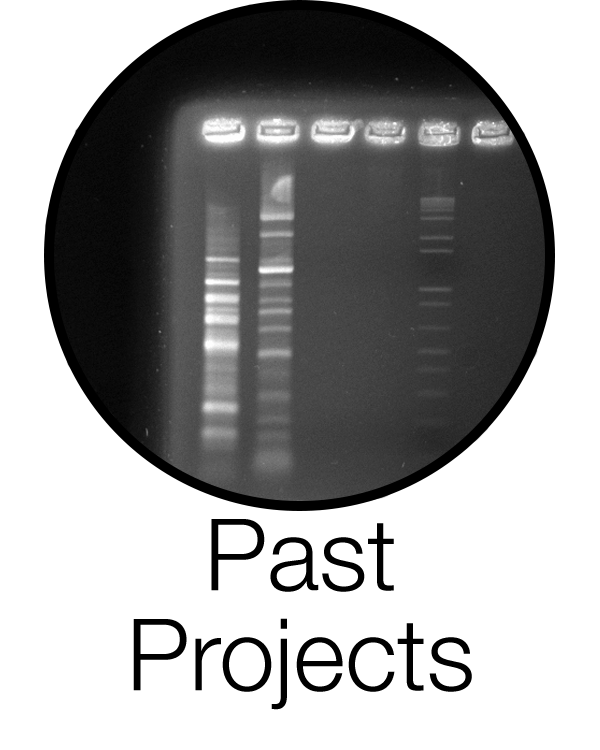
<style>
.page{position:relative;width:600px;height:750px;background:#ffffff}
.page>*{position:absolute;margin:0}
.t1{font:100px/100px "HelveticaNeue-Light";color:#000000}
</style>
<div class="page">
<p class="t1" style="left:133px;top:519px;width:339px;height:191px;text-align:center">Past<br>Projects</p>
</div>
